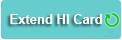
<style>
.page{position:relative;width:122px;height:40px;background:#66cccc}
.page>*{position:absolute;margin:0}
.t1{font:13px "Arial-BoldMT";color:#ffffff}
</style>
<div class="page">
<p class="t1" style="left:10px;top:14px;width:93px;height:10px">Extend HI Card</p>
</div>
